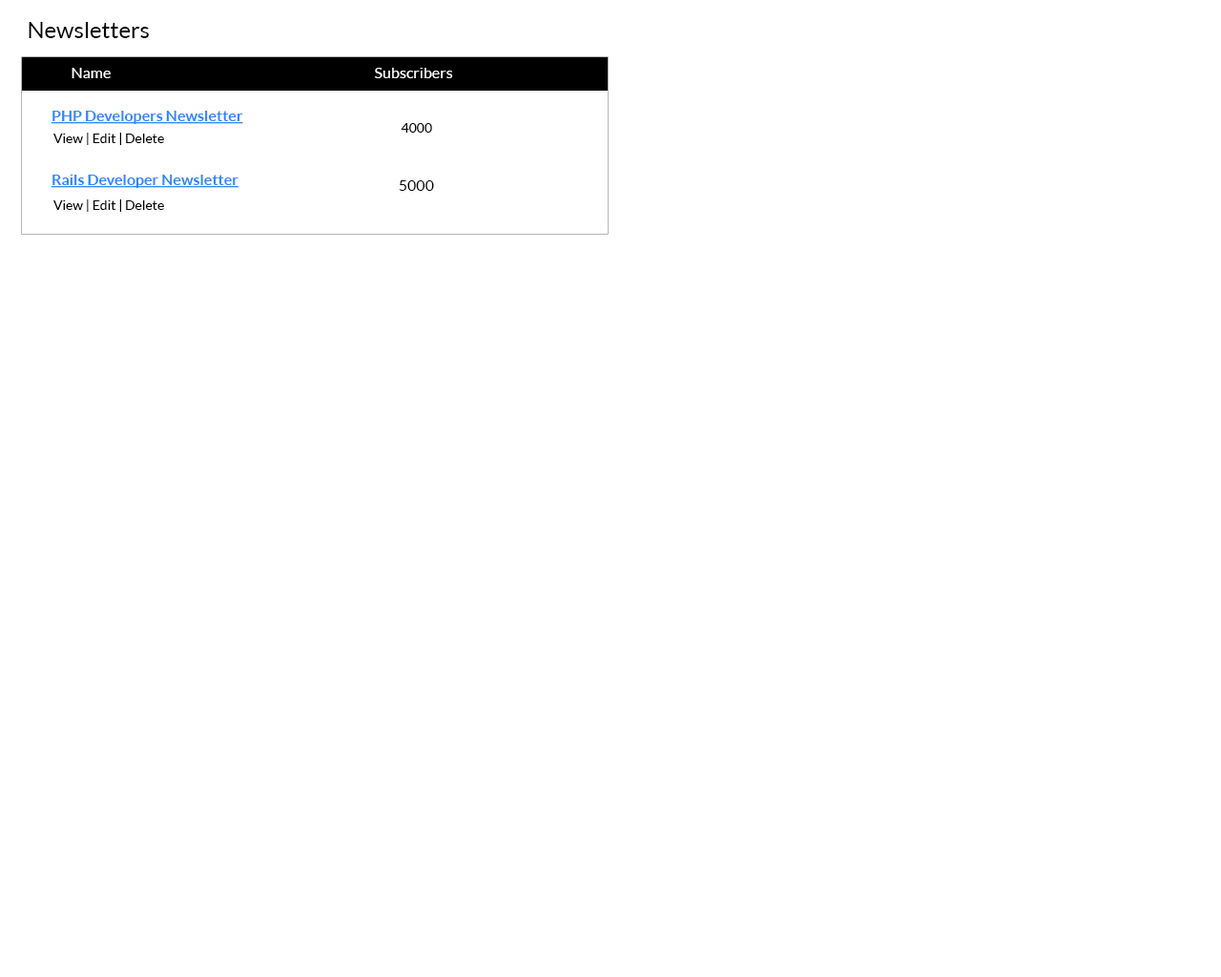
<style>
.page{position:relative;width:1221px;height:977px;background:#ffffff}
.page>*{position:absolute;margin:0}
.t1{font:22.9px "Lato-Regular";color:#010000}
.t2{font:15.3px "Lato-Regular";color:#ffffff}
.t3{font:15.3px "Lato-Bold";color:#2f88f5;text-decoration:underline}
.t4{font:13.4px "Lato-Regular";color:#000000}
.t5{font:15.3px "Lato-Regular";color:#000000}
</style>
<div class="page">
<p class="t1" style="left:29px;top:22px;width:120px;height:16px">Newsletters</p>
<p class="t2" style="left:72px;top:68px;width:39px;height:10px">Name</p>
<p class="t2" style="left:375px;top:68px;width:78px;height:10px">Subscribers</p>
<p class="t3" style="left:51px;top:111px;width:192px;height:13px">PHP Developers Newsletter</p>
<p class="t4" style="left:401px;top:123px;width:31px;height:10px">4000</p>
<p class="t4" style="left:52px;top:133px;width:112px;height:12px">View | Edit | Delete</p>
<p class="t3" style="left:51px;top:175px;width:187px;height:13px">Rails Developer Newsletter</p>
<p class="t5" style="left:399px;top:180px;width:35px;height:11px">5000</p>
<p class="t4" style="left:52px;top:199px;width:112px;height:13px">View | Edit | Delete</p>
</div>
